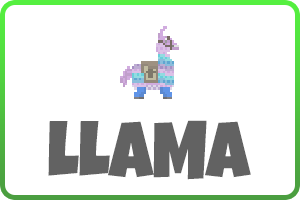
<style>
.page{position:relative;width:300px;height:200px;background:#ffffff}
.page>*{position:absolute;margin:0}
.t1{font:80.5px "LuckiestGuy-Regular";letter-spacing:-0.01em;color:#626262;text-transform:uppercase;scale:0.87 1}
</style>
<div class="page">
<p class="t1" style="left:48px;top:120px;width:203px;height:60px">llama</p>
</div>
